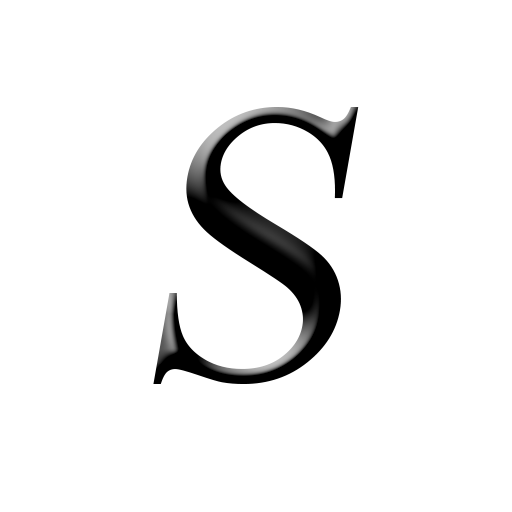
<style>
.page{position:relative;width:512px;height:512px;background:#ffffff}
.page>*{position:absolute;margin:0}
.t1{font:400px "TimesNewRomanPSMT";color:#000000;font-style:italic}
</style>
<div class="page">
<p class="t1" style="left:153px;top:107px;width:206px;height:277px">S</p>
</div>
